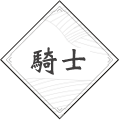
<style>
.page{position:relative;width:120px;height:120px;background:#ffffff}
.page>*{position:absolute;margin:0}
.t1{font:30px "WeibeiTC-Bold";color:#403e3e}
</style>
<div class="page">
<p class="t1" style="left:30px;top:47px;width:56px;height:28px">騎士</p>
</div>
